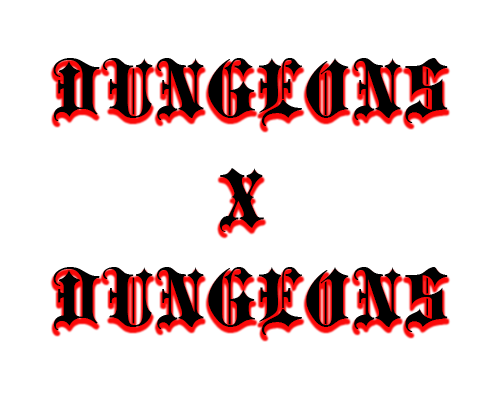
<style>
.page{position:relative;width:500px;height:400px;background:#ffffff}
.page>*{position:absolute;margin:0}
.t1{font:72px "BlackletterExtraBold";letter-spacing:0.05em;color:#000000;text-transform:uppercase}
</style>
<div class="page">
<p class="t1" style="left:53px;top:58px;width:395px;height:68px">Dungeons</p>
<p class="t1" style="left:219px;top:168px;width:45px;height:64px">X</p>
<p class="t1" style="left:53px;top:267px;width:395px;height:68px">Dungeons</p>
</div>
